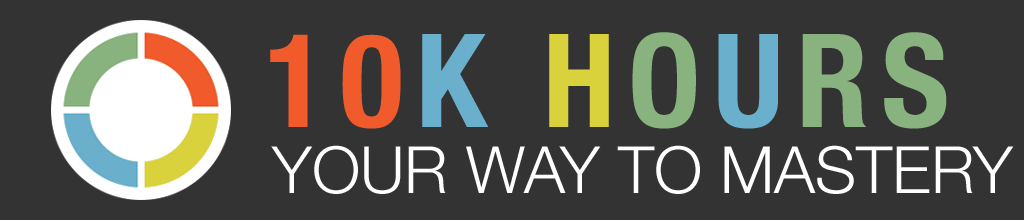
<style>
.page{position:relative;width:1024px;height:220px;background:#333333}
.page>*{position:absolute;margin:0}
.t1{font:130px "HelveticaNeue-CondensedBold";letter-spacing:0.1em;color:#f15a2a}
.t2{font:130px "HelveticaNeue-CondensedBold";letter-spacing:0.1em;color:#6aafcc}
.t3{font:130px "HelveticaNeue-CondensedBold";letter-spacing:0.1em;color:#dad23d}
.t4{font:130px "HelveticaNeue-CondensedBold";letter-spacing:0.1em;color:#88b27e}
.t5{font:65px "HelveticaNeue-Light";color:#ffffff}
</style>
<div class="page">
<p class="t1" style="left:270px;top:32px;width:677px;height:97px">10<span class="t2">K </span><span class="t3">H</span><span class="t4">O</span><span class="t2">U</span><span class="t4">RS</span></p>
<p class="t5" style="left:271px;top:145px;width:743px;height:49px">YOUR WAY TO MASTERY</p>
</div>
